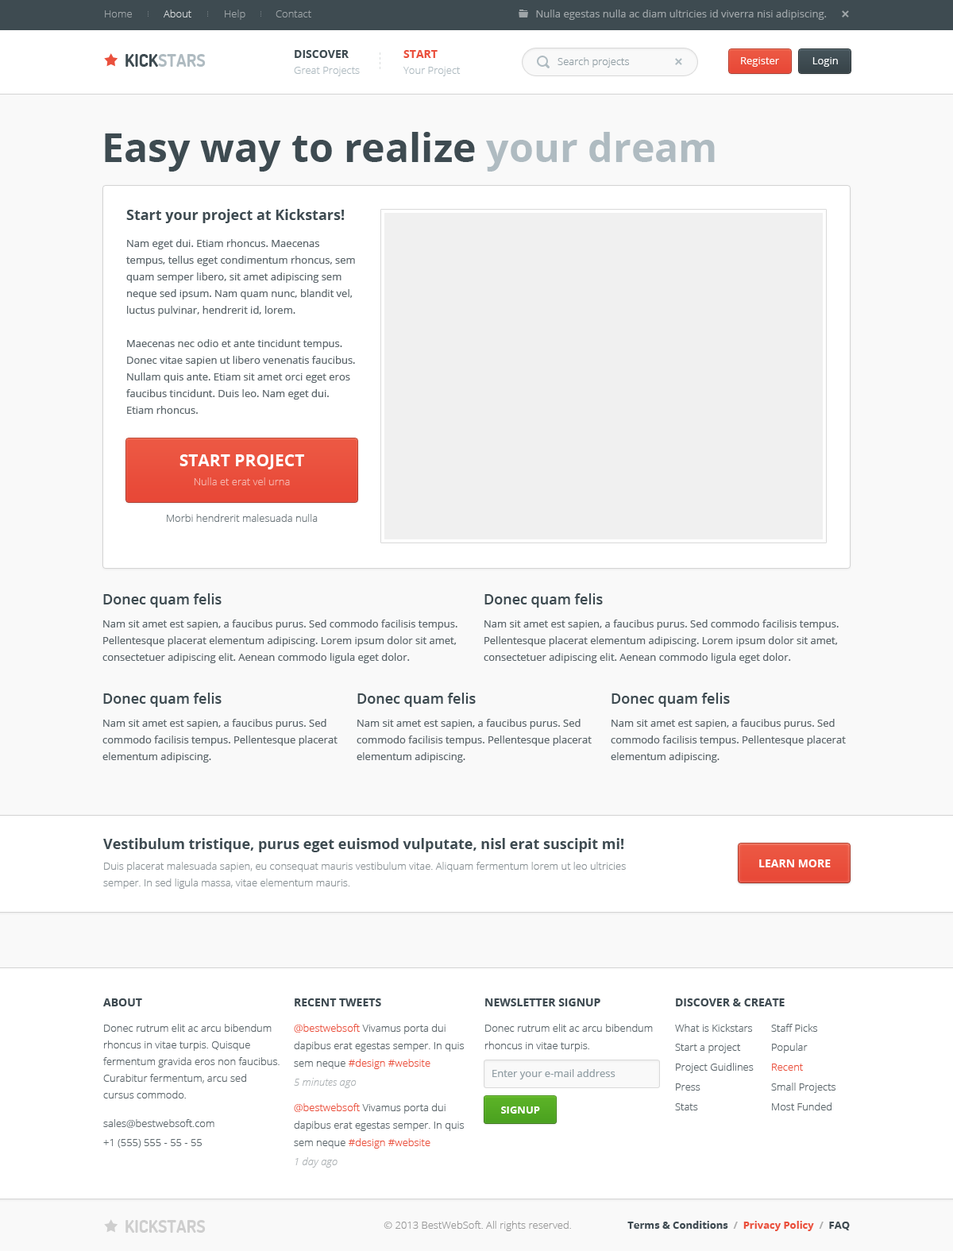
<style>
.page{position:relative;width:953px;height:1251px;background:#f9f9f9}
.page>*{position:absolute;margin:0}
.t1{font:10.3px "OpenSans-Light";color:#9fa5a8}
.t2{font:10.3px "OpenSans-Light";color:#d8dbdc}
.t3{font:10.3px "OpenSans";color:#9fa5a8}
.t4{font:11.1px "OpenSans-Bold";color:#3e4b51;text-transform:uppercase}
.t5{font:11.1px "OpenSans-Bold";color:#ea503d;text-transform:uppercase}
.t6{font:17.5px "Dosis-Bold";color:#afbbc1;text-transform:uppercase}
.t7{font:17.5px "Dosis-Bold";color:#3e4b51;text-transform:uppercase}
.t8{font:10.3px "OpenSans-Light";color:#909da3}
.t9{font:10.3px "OpenSans";color:#ffffff}
.t10{font:10.3px "OpenSans-Light";color:#afbbc1}
.t11{font:39.7px "OpenSans-Bold";color:#3e4b51}
.t12{font:39.7px "OpenSans-Bold";color:#afbbc1}
.t13{font:14.3px "OpenSans-Bold";color:#3e4b51}
.t14{font:10.3px/16.7px "OpenSans";color:#5c666b}
.t15{font:16.7px "OpenSans-Bold";color:#ffffff;text-transform:uppercase}
.t16{font:10.3px "OpenSans-Light";color:#f6b7b0}
.t17{font:10.3px "OpenSans-Light";color:#6e787d}
.t18{font:14.3px "OpenSans-Semibold";color:#3e4b51}
.t19{font:10.3px/16.7px "OpenSans-Light";color:#8b9397}
.t20{font:11.1px "OpenSans-Bold";color:#ffffff;text-transform:uppercase}
.t21{font:11.1px "OpenSans-Bold";color:#3e4a51;text-transform:uppercase}
.t22{font:10.3px/16.7px "OpenSans-Light";color:#5c666b}
.t23{font:10.3px/17.5px "OpenSans-Light";color:#5c666b}
.t24{font:10.3px/17.5px "OpenSans-Light";color:#ea503d}
.t25{font:10.3px "OpenSans-Light";color:#5c666b}
.t26{font:10.3px "OpenSans";color:#909da3}
.t27{font:10.3px "OpenSans-Light";color:#ea503d}
.t28{font:10.3px "OpenSansLight-Italic";color:#adb2b5}
.t29{font:10.3px "OpenSans-Bold";color:#ffffff;text-transform:uppercase}
.t30{font:17.5px "Dosis-Bold";color:#cecece;text-transform:uppercase}
.t31{font:10.3px "OpenSans-Light";color:#999999}
.t32{font:10.3px "OpenSans-Bold";color:#3e4a51}
.t33{font:10.3px "OpenSans-Bold";color:#aeaeae}
.t34{font:10.3px "OpenSans-Bold";color:#ea503d}
</style>
<div class="page">
<p class="t1" style="left:105px;top:10px;width:27px;height:7px">Home</p>
<p class="t2" style="left:164px;top:10px;width:27px;height:7px">About</p>
<p class="t1" style="left:225px;top:10px;width:20px;height:10px">Help</p>
<p class="t1" style="left:276px;top:10px;width:35px;height:7px">Contact</p>
<p class="t3" style="left:536px;top:10px;width:291px;height:10px">Nulla egestas nulla ac diam ultricies id viverra nisi adipiscing.</p>
<p class="t4" style="left:295px;top:50px;width:54px;height:8px">Discover</p>
<p class="t5" style="left:404px;top:50px;width:34px;height:8px">Start</p>
<p class="t6" style="left:125px;top:54px;width:81px;height:13px"><span class="t7">Kick</span>stars</p>
<p class="t8" style="left:558px;top:57px;width:71px;height:11px">Search projects</p>
<p class="t9" style="left:741px;top:57px;width:38px;height:10px">Register</p>
<p class="t9" style="left:813px;top:57px;width:25px;height:10px">Login</p>
<p class="t10" style="left:294px;top:67px;width:66px;height:9px">Great Projects</p>
<p class="t10" style="left:404px;top:67px;width:57px;height:9px">Your Project</p>
<p class="t11" style="left:105px;top:132px;width:610px;height:40px">Easy way to realize <span class="t12">your dream</span></p>
<p class="t13" style="left:126px;top:209px;width:219px;height:14px">Start your project at Kickstars!</p>
<p class="t14" style="left:126px;top:239px;width:229px;height:175px">Nam eget dui. Etiam rhoncus. Maecenas tempus, tellus eget condimentum rhoncus, sem quam semper libero, sit amet adipiscing sem neque sed ipsum. Nam quam nunc, blandit vel, luctus pulvinar, hendrerit id, lorem. <br><br>Maecenas nec odio et ante tincidunt tempus. Donec vitae sapien ut libero venenatis faucibus. Nullam quis ante. Etiam sit amet orci eget eros faucibus tincidunt. Duis leo. Nam eget dui. Etiam rhoncus.</p>
<p class="t15" style="left:180px;top:454px;width:124px;height:15px">Start project</p>
<p class="t16" style="left:194px;top:477px;width:96px;height:8px">Nulla et erat vel urna</p>
<p class="t17" style="left:167px;top:514px;width:151px;height:8px">Morbi hendrerit malesuada nulla</p>
<p class="t18" style="left:103px;top:593px;width:119px;height:15px">Donec quam felis</p>
<p class="t18" style="left:485px;top:593px;width:118px;height:15px">Donec quam felis</p>
<p class="t14" style="left:102px;top:620px;width:356px;height:43px">Nam sit amet est sapien, a faucibus purus. Sed commodo facilisis tempus. Pellentesque placerat elementum adipiscing. Lorem ipsum dolor sit amet, consectetuer adipiscing elit. Aenean commodo ligula eget dolor.</p>
<p class="t14" style="left:484px;top:620px;width:355px;height:43px">Nam sit amet est sapien, a faucibus purus. Sed commodo facilisis tempus. Pellentesque placerat elementum adipiscing. Lorem ipsum dolor sit amet, consectetuer adipiscing elit. Aenean commodo ligula eget dolor.</p>
<p class="t18" style="left:103px;top:693px;width:119px;height:14px">Donec quam felis</p>
<p class="t18" style="left:357px;top:693px;width:119px;height:14px">Donec quam felis</p>
<p class="t18" style="left:612px;top:693px;width:118px;height:14px">Donec quam felis</p>
<p class="t14" style="left:102px;top:719px;width:236px;height:44px">Nam sit amet est sapien, a faucibus purus. Sed commodo facilisis tempus. Pellentesque placerat elementum adipiscing.</p>
<p class="t14" style="left:357px;top:719px;width:235px;height:44px">Nam sit amet est sapien, a faucibus purus. Sed commodo facilisis tempus. Pellentesque placerat elementum adipiscing.</p>
<p class="t14" style="left:611px;top:719px;width:235px;height:44px">Nam sit amet est sapien, a faucibus purus. Sed commodo facilisis tempus. Pellentesque placerat elementum adipiscing.</p>
<p class="t13" style="left:103px;top:838px;width:521px;height:14px">Vestibulum tristique, purus eget euismod vulputate, nisl erat suscipit mi!</p>
<p class="t19" style="left:103px;top:862px;width:523px;height:27px">Duis placerat malesuada sapien, eu consequat mauris vestibulum vitae. Aliquam fermentum lorem ut leo ultricies semper. In sed ligula massa, vitae elementum mauris.</p>
<p class="t20" style="left:759px;top:859px;width:72px;height:8px">Learn More</p>
<p class="t21" style="left:103px;top:998px;width:39px;height:8px">About</p>
<p class="t21" style="left:295px;top:998px;width:86px;height:8px">Recent Tweets</p>
<p class="t21" style="left:485px;top:998px;width:115px;height:8px">Newsletter Signup</p>
<p class="t21" style="left:676px;top:998px;width:109px;height:8px">Discover &amp; Create</p>
<p class="t22" style="left:103px;top:1024px;width:177px;height:75px">Donec rutrum elit ac arcu bibendum rhoncus in vitae turpis. Quisque fermentum gravida eros non faucibus. Curabitur fermentum, arcu sed cursus commodo.</p>
<p class="t23" style="left:294px;top:1024px;width:170px;height:45px"><span class="t24">@bestwebsoft</span> Vivamus porta dui dapibus erat egestas semper. In quis sem neque <span class="t24">#design #website</span></p>
<p class="t23" style="left:485px;top:1024px;width:168px;height:28px">Donec rutrum elit ac arcu bibendum rhoncus in vitae turpis.</p>
<p class="t25" style="left:675px;top:1024px;width:77px;height:8px">What is Kickstars</p>
<p class="t25" style="left:771px;top:1024px;width:46px;height:8px">Staff Picks</p>
<p class="t25" style="left:675px;top:1044px;width:66px;height:9px">Start a project</p>
<p class="t25" style="left:772px;top:1043px;width:36px;height:10px">Popular</p>
<p class="t26" style="left:492px;top:1069px;width:124px;height:10px">Enter your e-mail address</p>
<p class="t25" style="left:676px;top:1063px;width:78px;height:10px">Project Guidlines</p>
<p class="t27" style="left:772px;top:1064px;width:31px;height:7px">Recent</p>
<p class="t28" style="left:294px;top:1078px;width:63px;height:10px">5 minutes ago</p>
<p class="t25" style="left:676px;top:1083px;width:25px;height:8px">Press</p>
<p class="t25" style="left:771px;top:1083px;width:65px;height:10px">Small Projects</p>
<p class="t23" style="left:294px;top:1103px;width:170px;height:46px"><span class="t24">@bestwebsoft </span>Vivamus porta dui dapibus erat egestas semper. In quis sem neque <span class="t24">#design #website</span></p>
<p class="t29" style="left:501px;top:1106px;width:39px;height:8px">Signup</p>
<p class="t25" style="left:675px;top:1103px;width:23px;height:7px">Stats</p>
<p class="t25" style="left:772px;top:1102px;width:60px;height:8px">Most Funded</p>
<p class="t25" style="left:103px;top:1119px;width:111px;height:9px">sales@bestwebsoft.com</p>
<p class="t25" style="left:103px;top:1139px;width:99px;height:9px">+1 (555) 555 - 55 - 55</p>
<p class="t28" style="left:295px;top:1157px;width:43px;height:11px">1 day ago</p>
<p class="t30" style="left:125px;top:1220px;width:81px;height:13px">Kickstars</p>
<p class="t31" style="left:384px;top:1221px;width:187px;height:10px">© 2013 BestWebSoft. All rights reserved.</p>
<p class="t32" style="left:627px;top:1221px;width:223px;height:10px">Terms &amp; Conditions <span class="t33"> /  </span><span class="t34">Privacy Policy  </span><span class="t33">/  </span>FAQ</p>
</div>
